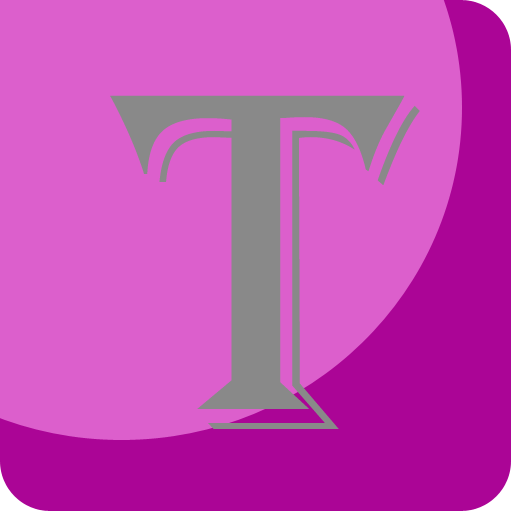
<style>
.page{position:relative;width:512px;height:512px;background:#dc5fcc}
.page>*{position:absolute;margin:0}
.t1{font:500px "Algerian";color:#898989}
</style>
<div class="page">
<p class="t1" style="left:110px;top:95px;width:310px;height:334px">T</p>
</div>
